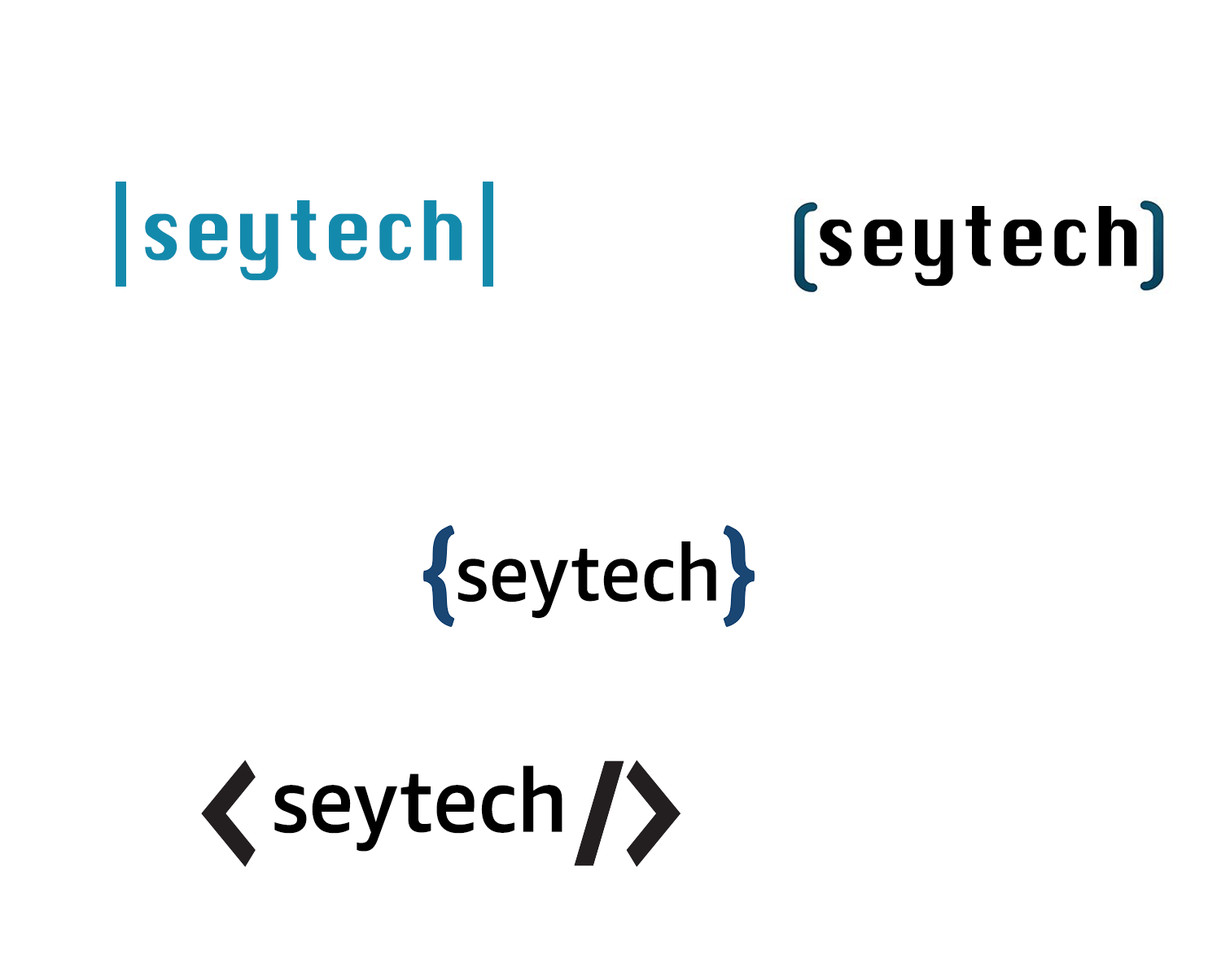
<style>
.page{position:relative;width:1221px;height:977px;background:#ffffff}
.page>*{position:absolute;margin:0}
.t1{font:80px "Silom";color:#138aac;scale:0.95 1}
.t2{font:80px "Silom";color:#000000;scale:0.95 1}
.t3{font:80px "AmazonEmber-Medium";color:#000000;scale:0.95 1}
.t4{font:89.1px "AmazonEmber-Medium";color:#000000;scale:0.95 1}
</style>
<div class="page">
<p class="t1" style="left:145px;top:200px;width:317px;height:81px">seytech</p>
<p class="t2" style="left:820px;top:206px;width:317px;height:80px">seytech</p>
<p class="t3" style="left:457px;top:541px;width:259px;height:78px">seytech</p>
<p class="t4" style="left:274px;top:765px;width:288px;height:86px">seytech</p>
</div>
